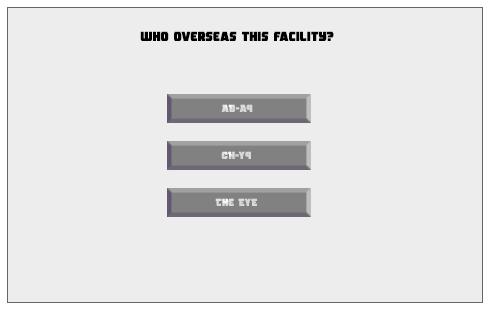
<style>
.page{position:relative;width:491px;height:311px;background:#ededed}
.page>*{position:absolute;margin:0}
.t1{font:12.9px "RogueHero";color:#000000}
.t2{font:10.4px "RogueHero";color:#d9d8d8}
</style>
<div class="page">
<p class="t1" style="left:140px;top:31px;width:194px;height:10px">who overseas this facility?</p>
<p class="t2" style="left:221px;top:104px;width:32px;height:8px">AB-A9</p>
<p class="t2" style="left:221px;top:151px;width:30px;height:8px">CH-Y9</p>
<p class="t2" style="left:215px;top:198px;width:42px;height:8px">The EYE</p>
</div>
